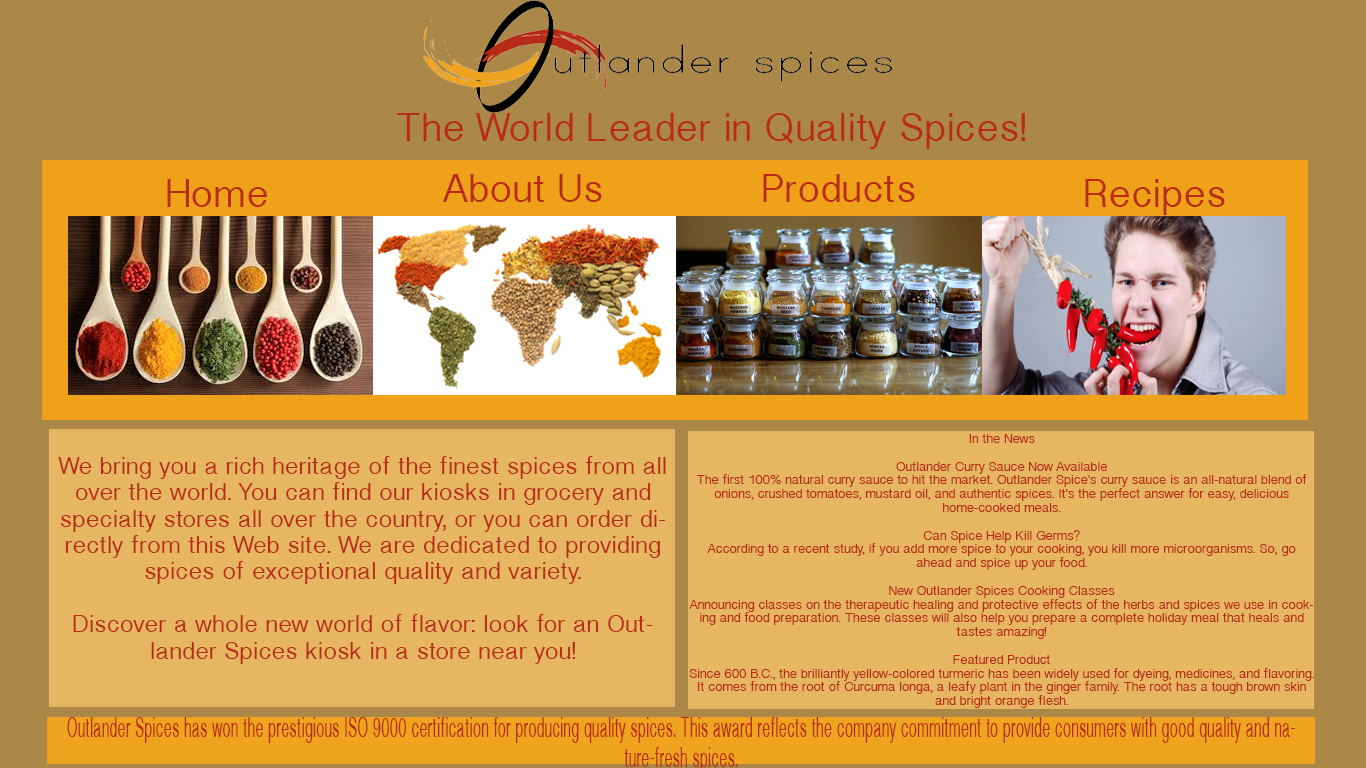
<style>
.page{position:relative;width:1366px;height:768px;background:#e6b662}
.page>*{position:absolute;margin:0}
.t1{font:36px "BanglaSangamMN";color:#b72b18}
.t2{font:11.5px "BanglaSangamMN";color:#b72b18}
.t3{font:22px "BanglaSangamMN";color:#b72b18}
</style>
<div class="page">
<p class="t1" style="left:397px;top:113px;width:628px;height:36px">The World Leader in Quality Spices!</p>
<p class="t1" style="left:443px;top:174px;width:159px;height:28px">About Us</p>
<p class="t1" style="left:763px;top:174px;width:152px;height:28px">Products</p>
<p class="t1" style="left:167px;top:179px;width:100px;height:28px">Home</p>
<p class="t1" style="left:1085px;top:179px;width:140px;height:36px">Recipes</p>
<p class="t2" style="left:689px;top:434px;width:625px;height:274px;text-align:center">In the News<br><br>Outlander Curry Sauce Now Available<br>The first 100% natural curry sauce to hit the market. Outlander Spice's curry sauce is an all-natural blend of onions, crushed tomatoes, mustard oil, and authentic spices. It's the perfect answer for easy, delicious home-cooked meals.<br><br>Can Spice Help Kill Germs?<br>According to a recent study, if you add more spice to your cooking, you kill more microorganisms. So, go ahead and spice up your food.<br>   <br>New Outlander Spices Cooking Classes<br>Announcing classes on the therapeutic healing and protective effects of the herbs and spices we use in cooking and food preparation. These classes will also help you prepare a complete holiday meal that heals and tastes amazing!<br><br>Featured Product<br>Since 600 B.C., the brilliantly yellow-colored turmeric has been widely used for dyeing, medicines, and flavoring. It comes from the root of Curcuma longa, a leafy plant in the ginger family. The root has a tough brown skin and bright orange flesh.</p>
<p class="t3" style="left:58px;top:456px;width:608px;height:208px;text-align:center">We bring you a rich heritage of the finest spices from all over the world. You can find our kiosks in grocery and specialty stores all over the country, or you can order directly from this Web site. We are dedicated to providing spices of exceptional quality and variety.<br><br>Discover a whole new world of flavor: look for an Outlander Spices kiosk in a store near you!</p>
</div>
